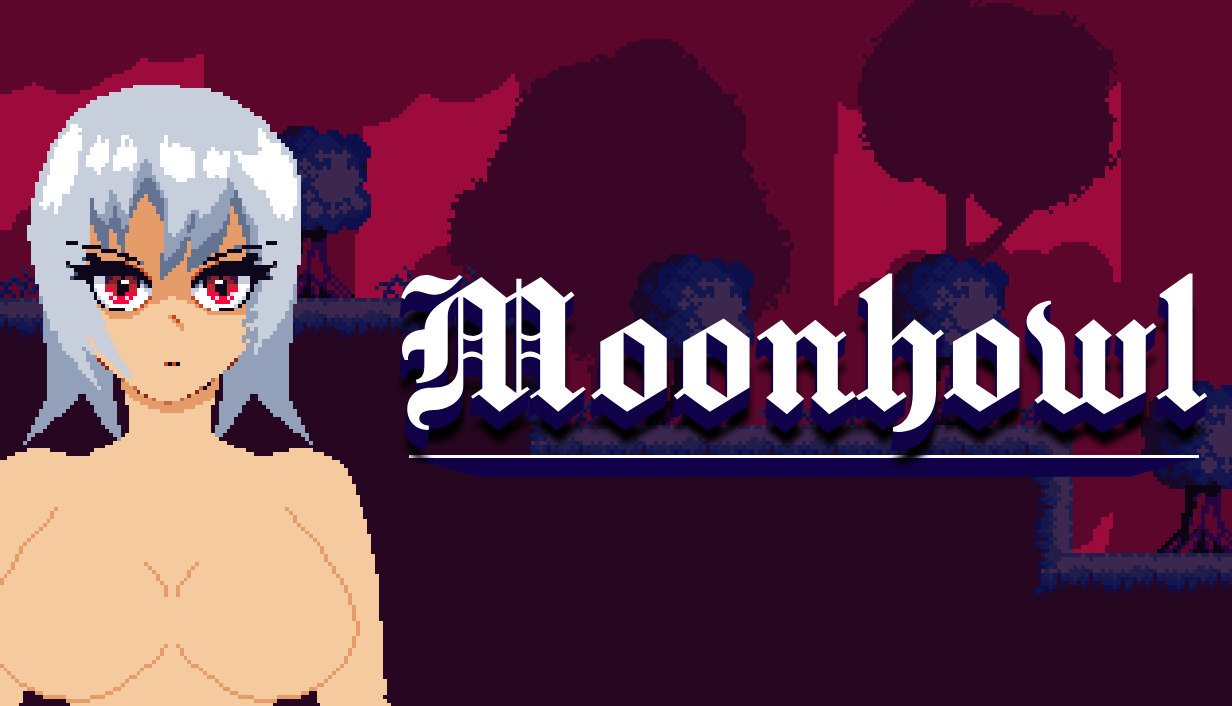
<style>
.page{position:relative;width:1232px;height:706px;background:#260621}
.page>*{position:absolute;margin:0}
.t1{font:180px "Chomsky";color:#ffffff}
</style>
<div class="page">
<p class="t1" style="left:401px;top:273px;width:807px;height:159px">Moonhowl</p>
</div>
